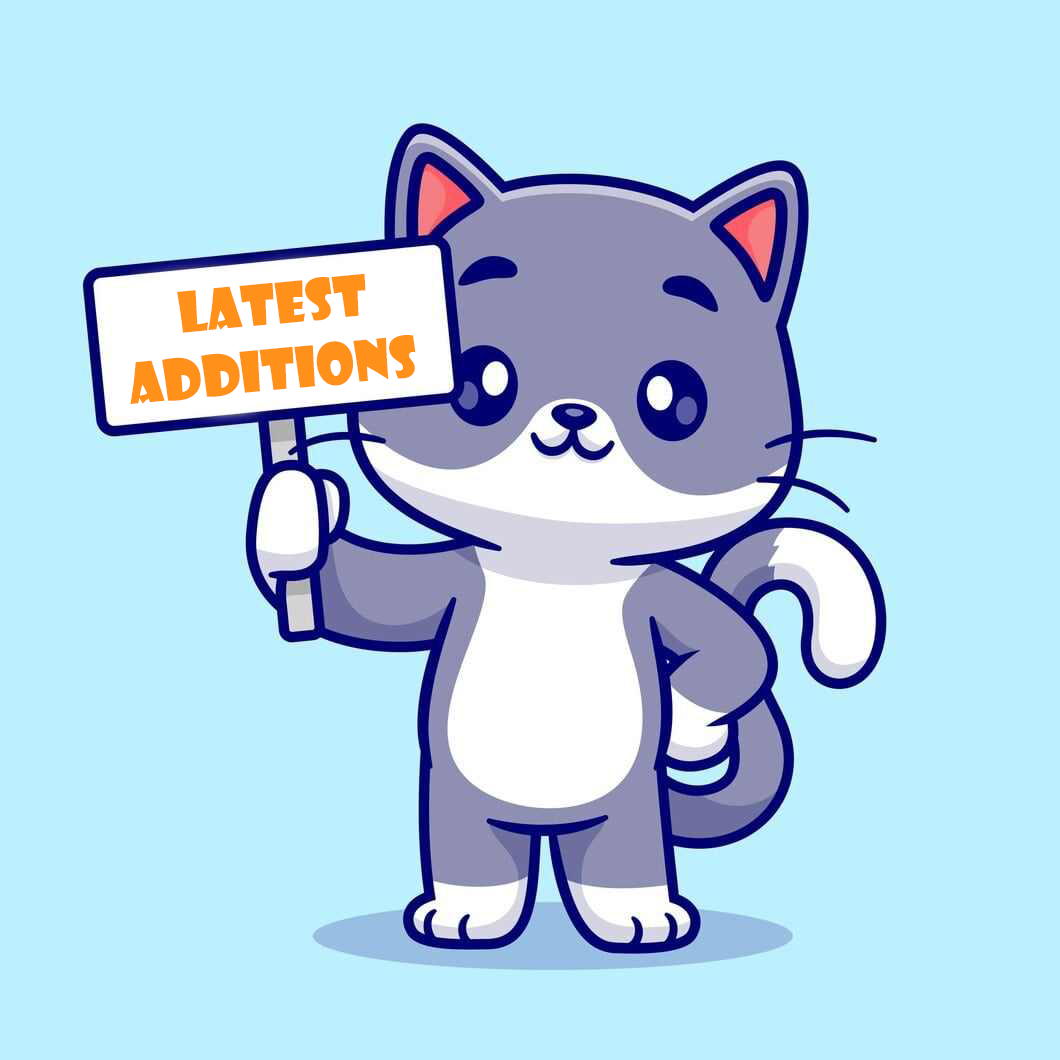
<style>
.page{position:relative;width:1060px;height:1060px;background:#bcefff}
.page>*{position:absolute;margin:0}
.t1{font:55px "ShowcardGothic-Reg";color:#ff911a}
</style>
<div class="page">
<p class="t1" style="left:130px;top:273px;width:286px;height:131px;rotate:-6deg">Latest <br>ADditions</p>
</div>
